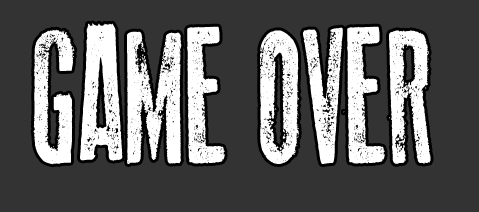
<style>
.page{position:relative;width:479px;height:212px;background:#333333}
.page>*{position:absolute;margin:0}
.t1{font:190px "OldPress";color:#ffffff;scale:0.65 1}
</style>
<div class="page">
<p class="t1" style="left:33px;top:23px;width:398px;height:142px">GAME OVER</p>
</div>
